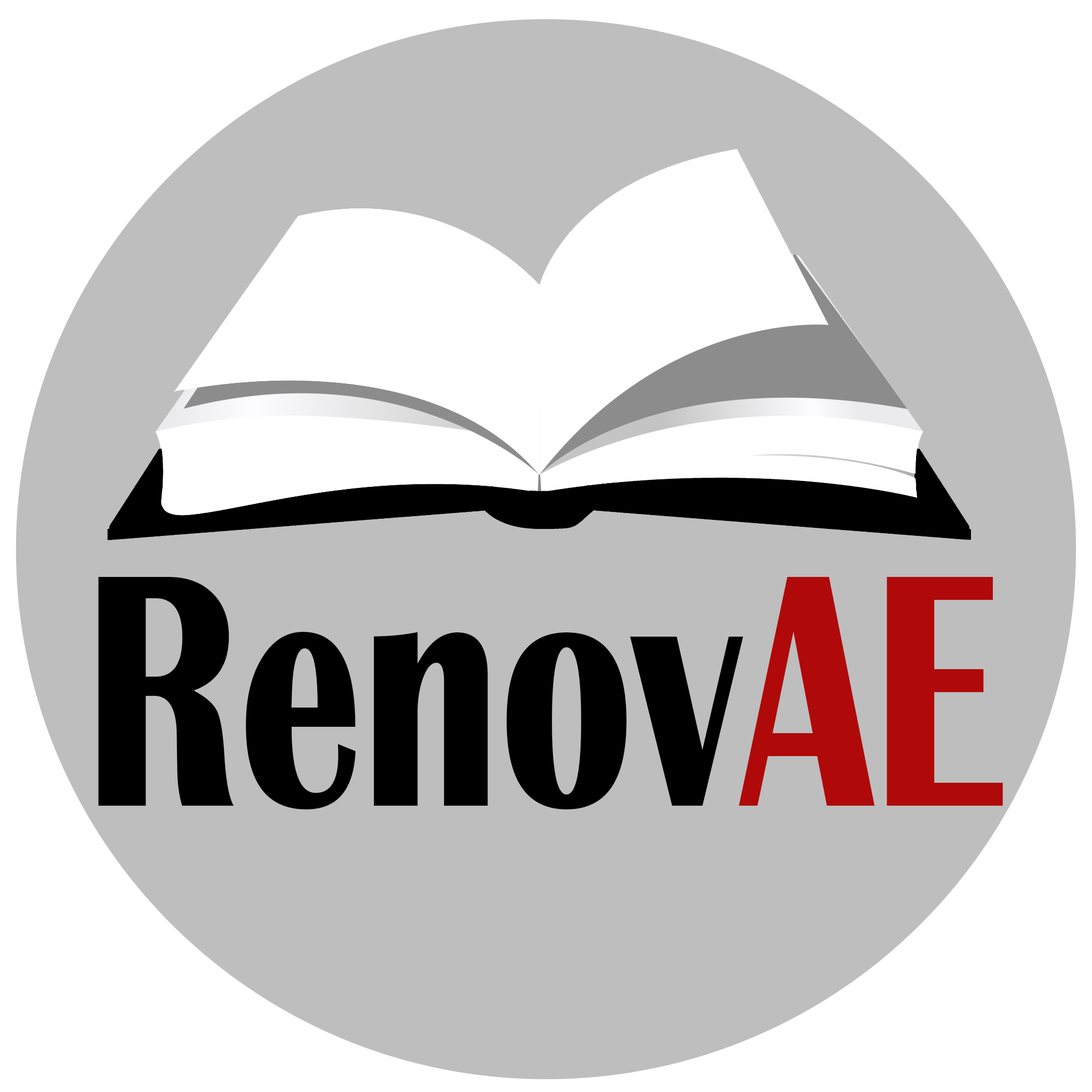
<style>
.page{position:relative;width:1092px;height:1092px;background:#bebebe}
.page>*{position:absolute;margin:0}
.t1{font:343.4px "BritannicBold";color:#000000;scale:0.71 1}
.t2{font:343.4px "BritannicBold";color:#b00909;scale:0.71 1}
</style>
<div class="page">
<p class="t1" style="left:98px;top:577px;width:905px;height:232px">Renov<span class="t2">AE</span></p>
</div>
